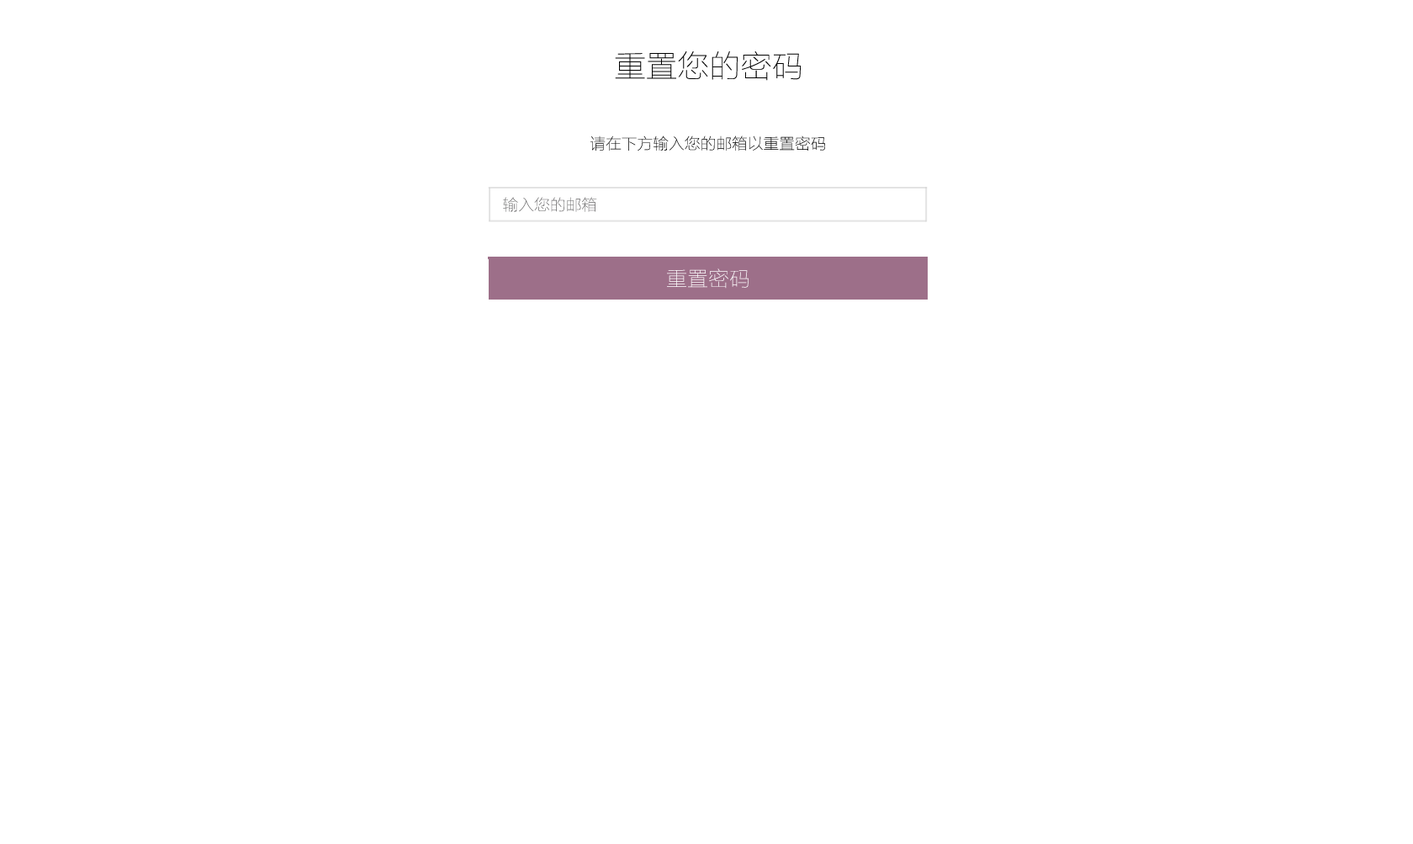
<style>
.page{position:relative;width:1413px;height:844px;background:#ffffff}
.page>*{position:absolute;margin:0}
.t1{font:31.5px "FZLTCXHJW--GB1-0";color:#000000}
.t2{font:15.8px "FZLTCXHJW--GB1-0";color:#000000}
.t3{font:15.8px "FZLTCXHJW--GB1-0";color:#666566}
.t4{font:21px "FZLTCXHJW--GB1-0";color:#ffffff}
</style>
<div class="page">
<p class="t1" style="left:615px;top:51px;width:187px;height:30px">重置您的密码</p>
<p class="t2" style="left:591px;top:135px;width:234px;height:16px">请在下方输入您的邮箱以重置密码</p>
<p class="t3" style="left:503px;top:197px;width:94px;height:15px">输入您的邮箱</p>
<p class="t4" style="left:667px;top:268px;width:82px;height:21px">重置密码</p>
</div>
